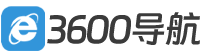
<style>
.page{position:relative;width:200px;height:56px;background:#ffffff}
.page>*{position:absolute;margin:0}
.t1{font:38px "DingTalk-JinBuTi";letter-spacing:-0.075em;color:#3b3b3b}
</style>
<div class="page">
<p class="t1" style="left:47px;top:12px;width:153px;height:33px">3600导航</p>
</div>
